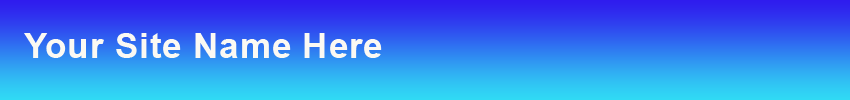
<style>
.page{position:relative;width:850px;height:100px}
.page>*{position:absolute;margin:0}
.t1{font:35px "Arial-BoldMT";letter-spacing:0.025em;color:#fbf9f3}
</style>
<div class="page">
<p class="t1" style="left:24px;top:33px;width:358px;height:25px">Your Site Name Here</p>
</div>
